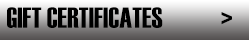
<style>
.page{position:relative;width:249px;height:40px}
.page>*{position:absolute;margin:0}
.t1{font:29px "Haettenschweiler";color:#000000}
.t2{font:36px "Haettenschweiler";color:#000000;scale:0.83 1}
</style>
<div class="page">
<p class="t1" style="left:7px;top:7px;width:156px;height:21px">GIFT CERTIFICATES</p>
<p class="t2" style="left:221px;top:12px;width:11px;height:13px">&gt;</p>
</div>
